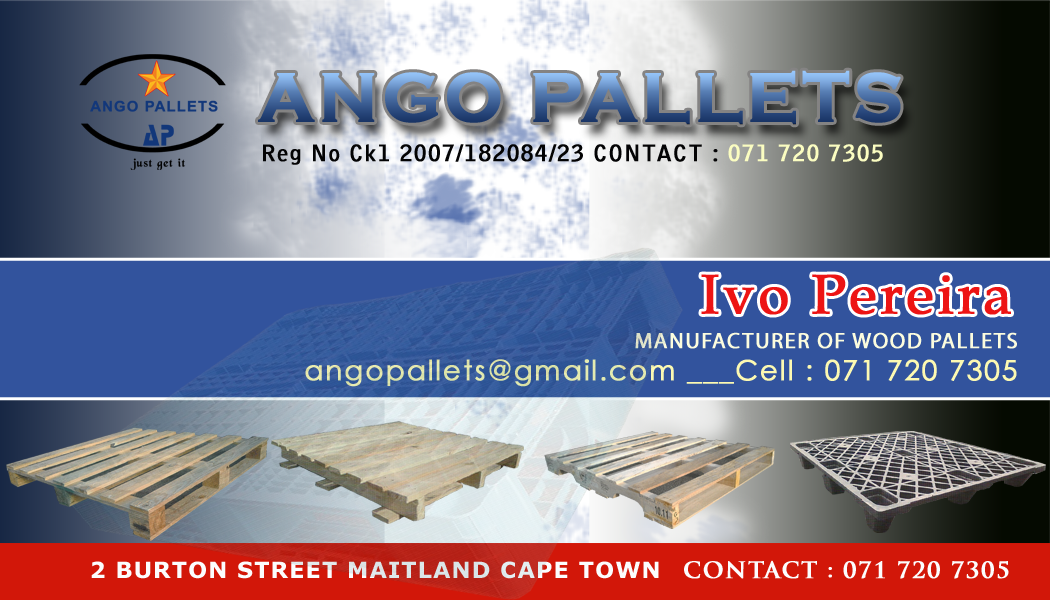
<style>
.page{position:relative;width:1050px;height:600px}
.page>*{position:absolute;margin:0}
.t1{font:72px "CopperplateGothic-Bold";letter-spacing:0.05em;font-weight:bold;scale:0.93 1}
.t2{font:22.4px "BellGothicStd-Bold";letter-spacing:0.05em;color:#030304;font-weight:bold}
.t3{font:22.4px "BellGothicStd-Bold";letter-spacing:0.05em;color:#fbfdc1;font-weight:bold}
.t4{font:55.4px "BookAntiqua";letter-spacing:0.05em;color:#ed1414;font-weight:bold}
.t5{font:22.2px "MyriadPro-Regular";letter-spacing:0.05em;color:#fcfcde;font-weight:bold}
.t6{font:27.7px "CenturyGothic";letter-spacing:0.05em;color:#fcf9b2;font-weight:bold}
.t7{font:22.4px "Verdana-Bold";letter-spacing:0.05em;color:#fcfdfe}
.t8{font:22.4px "TrajanPro-Bold";letter-spacing:0.05em;color:#fcfdfe;font-weight:bold}
</style>
<div class="page">
<p class="t1" style="left:258px;top:70px;width:643px;height:55px">ANGO PALLETS</p>
<p class="t2" style="left:263px;top:144px;width:620px;height:21px">Reg No Ck1 2007/182084/23 CONTACT : <span class="t3">071 720 7305</span></p>
<p class="t4" style="left:701px;top:274px;width:310px;height:41px">Ivo Pereira</p>
<p class="t5" style="left:635px;top:332px;width:382px;height:17px">MANUFACTURER OF WOOD PALLETS</p>
<p class="t6" style="left:305px;top:359px;width:712px;height:28px">angopallets@gmail.com ___Cell : 071 720 7305</p>
<p class="t7" style="left:91px;top:561px;width:568px;height:18px">2 BURTON STREET MAITLAND CAPE TOWN</p>
<p class="t8" style="left:684px;top:560px;width:325px;height:19px">CONTACT : 071 720 7305</p>
</div>
